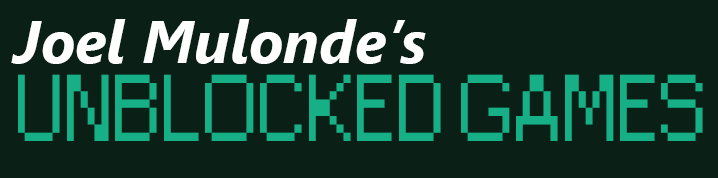
<style>
.page{position:relative;width:718px;height:178px;background:#0a2016}
.page>*{position:absolute;margin:0}
.t1{font:60px "SegoeUI-BoldItalic";color:#ffffff}
.t2{font:88.5px "Small Fonts";color:#16af86}
</style>
<div class="page">
<p class="t1" style="left:11px;top:19px;width:415px;height:45px">Joel Mulonde’s</p>
<p class="t2" style="left:18px;top:74px;width:685px;height:67px">UNBLOCKED GAMES</p>
</div>
